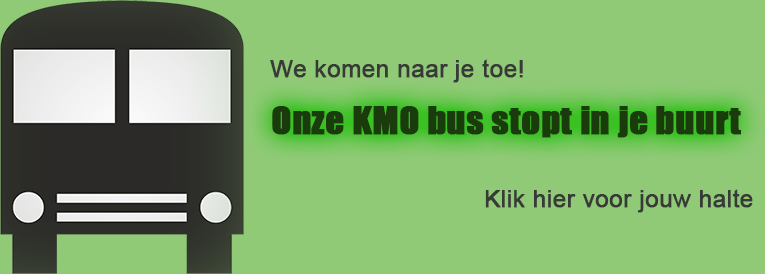
<style>
.page{position:relative;width:765px;height:274px;background:#90ca77}
.page>*{position:absolute;margin:0}
.t1{font:24px "ArialMT";color:#383a38;font-weight:bold}
.t2{font:36px "Impact";color:#1a3c0c;font-weight:bold}
</style>
<div class="page">
<p class="t1" style="left:270px;top:59px;width:253px;height:24px">We komen naar je toe!</p>
<p class="t2" style="left:272px;top:106px;width:469px;height:32px">Onze KMO bus stopt in je buurt</p>
<p class="t1" style="left:485px;top:189px;width:268px;height:24px">Klik hier voor jouw halte</p>
</div>
